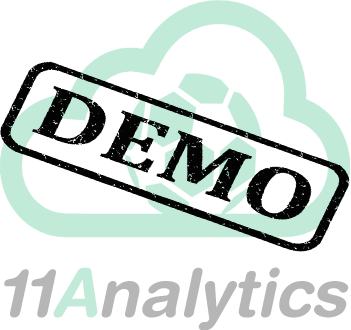
<style>
.page{position:relative;width:351px;height:330px;background:#ffffff}
.page>*{position:absolute;margin:0}
.t1{font:67px "HelveticaRoundedLTStd-BdO";color:#b6b6b6}
</style>
<div class="page">
<p class="t1" style="left:4px;top:267px;width:345px;height:64px">11Analytics</p>
</div>
